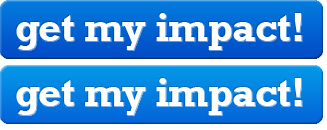
<style>
.page{position:relative;width:327px;height:130px;background:#ffffff}
.page>*{position:absolute;margin:0}
.t1{font:40px "Rockwell-Bold";letter-spacing:-0.01em;color:#ffffff}
</style>
<div class="page">
<p class="t1" style="left:16px;top:13px;width:286px;height:37px">get my impact!</p>
<p class="t1" style="left:16px;top:78px;width:286px;height:37px">get my impact!</p>
</div>
